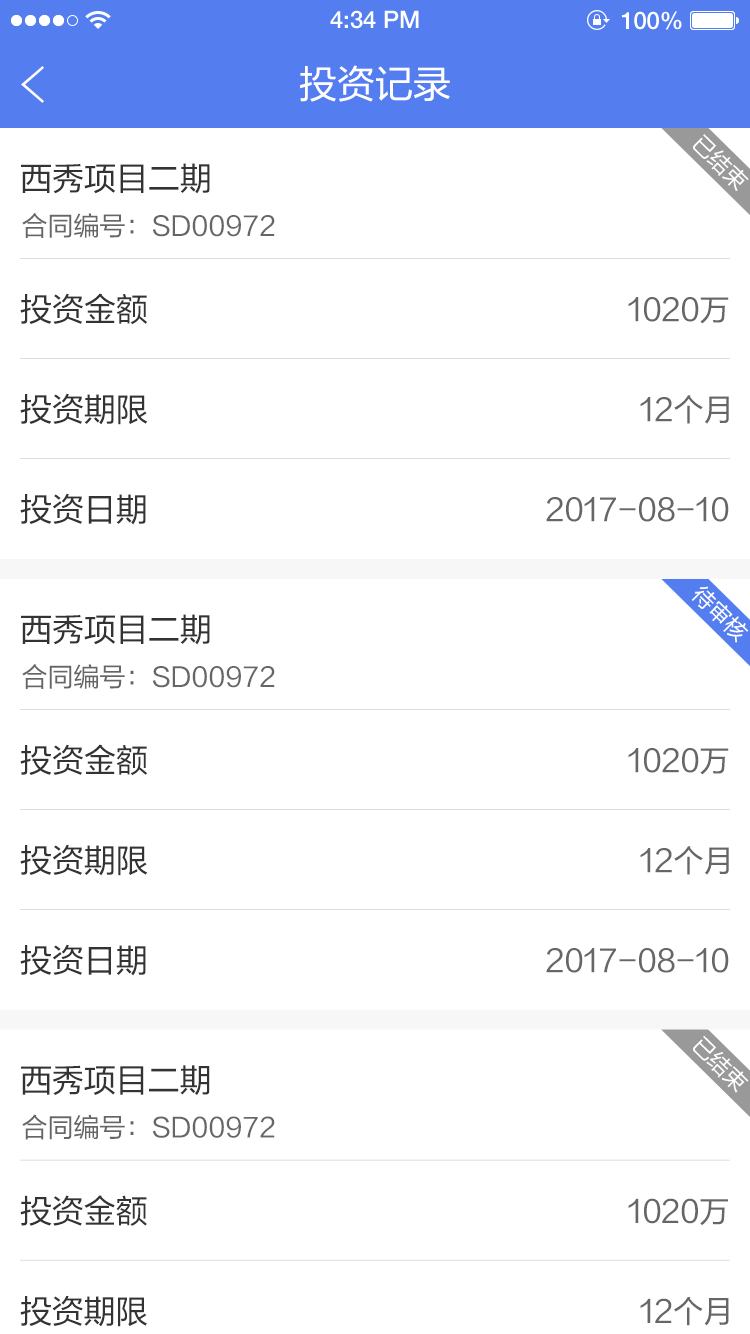
<style>
.page{position:relative;width:750px;height:1334px;background:#ffffff}
.page>*{position:absolute;margin:0}
.t1{font:24px "HelveticaNeueLTPro-Md";color:#ffffff}
.t2{font:38px "FZLTHJW-GB1-0";color:#ffffff}
.t3{font:32px "FZLTHJW-GB1-0";color:#333333}
.t4{font:26px "FZLTHJW-GB1-0";color:#666666}
.t5{font:30px "FZLTHJW-GB1-0";color:#666666}
</style>
<div class="page">
<p class="t1" style="left:330px;top:10px;width:89px;height:19px">4:34 PM</p>
<p class="t1" style="left:622px;top:11px;width:60px;height:19px">100%</p>
<p class="t2" style="left:300px;top:65px;width:150px;height:37px">投资记录</p>
<p class="t3" style="left:21px;top:163px;width:189px;height:31px">西秀项目二期</p>
<p class="t4" style="left:22px;top:213px;width:253px;height:25px">合同编号：SD00972</p>
<p class="t3" style="left:20px;top:293px;width:127px;height:32px">投资金额</p>
<p class="t5" style="left:628px;top:297px;width:101px;height:27px">1020万</p>
<p class="t3" style="left:20px;top:393px;width:128px;height:32px">投资期限</p>
<p class="t5" style="left:640px;top:395px;width:89px;height:29px">12个月</p>
<p class="t3" style="left:20px;top:493px;width:126px;height:32px">投资日期</p>
<p class="t5" style="left:546px;top:497px;width:183px;height:25px">2017-08-10</p>
<p class="t3" style="left:21px;top:614px;width:189px;height:31px">西秀项目二期</p>
<p class="t4" style="left:22px;top:664px;width:253px;height:25px">合同编号：SD00972</p>
<p class="t3" style="left:20px;top:744px;width:127px;height:32px">投资金额</p>
<p class="t5" style="left:628px;top:748px;width:101px;height:27px">1020万</p>
<p class="t3" style="left:20px;top:844px;width:128px;height:32px">投资期限</p>
<p class="t5" style="left:640px;top:846px;width:89px;height:29px">12个月</p>
<p class="t3" style="left:20px;top:944px;width:126px;height:32px">投资日期</p>
<p class="t5" style="left:546px;top:948px;width:183px;height:25px">2017-08-10</p>
<p class="t3" style="left:21px;top:1065px;width:189px;height:30px">西秀项目二期</p>
<p class="t4" style="left:22px;top:1114px;width:253px;height:26px">合同编号：SD00972</p>
<p class="t3" style="left:20px;top:1195px;width:127px;height:31px">投资金额</p>
<p class="t5" style="left:628px;top:1198px;width:100px;height:28px">1020万</p>
<p class="t3" style="left:20px;top:1295px;width:127px;height:32px">投资期限</p>
<p class="t5" style="left:640px;top:1297px;width:89px;height:29px">12个月</p>
</div>
